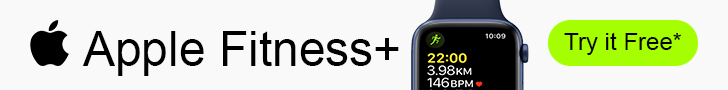
<style>
.page{position:relative;width:728px;height:90px;background:#f9f9f9}
.page>*{position:absolute;margin:0}
.t1{font:48px "ArialMT";color:#000000}
.t2{font:24px "ArialMT";color:#000000}
</style>
<div class="page">
<p class="t1" style="left:82px;top:31px;width:317px;height:45px">Apple Fitness+</p>
<p class="t2" style="left:564px;top:32px;width:117px;height:23px">Try it Free*</p>
</div>
